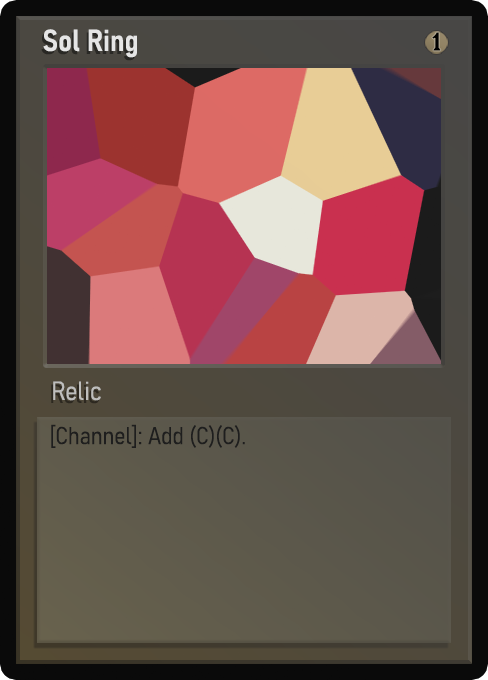
<style>
.page{position:relative;width:488px;height:680px}
.page>*{position:absolute;margin:0}
.t1{font:30px "Bahnschrift-SemiBoldSemiCondensed";color:#f2f2f2;font-weight:bold}
.t2{font:25px "WTRRoycroft";color:#000000;font-weight:bold;scale:1.09 1}
.t3{font:26px "Bahnschrift-LightSemiCondensed";color:#c8c8c8;font-weight:bold}
.t4{font:24px "Bahnschrift-LightSemiCondensed";color:#1e1e1e;font-weight:bold}
</style>
<div class="page">
<p class="t1" style="left:43px;top:29px;width:94px;height:29px;opacity:0.9">Sol Ring</p>
<p class="t2" style="left:432px;top:32px;width:9px;height:19px">1</p>
<p class="t3" style="left:53px;top:381px;width:48px;height:20px;opacity:0.9">Relic</p>
<p class="t4" style="left:51px;top:424px;width:194px;height:24px">[Channel]: Add (C)(C).</p>
</div>
